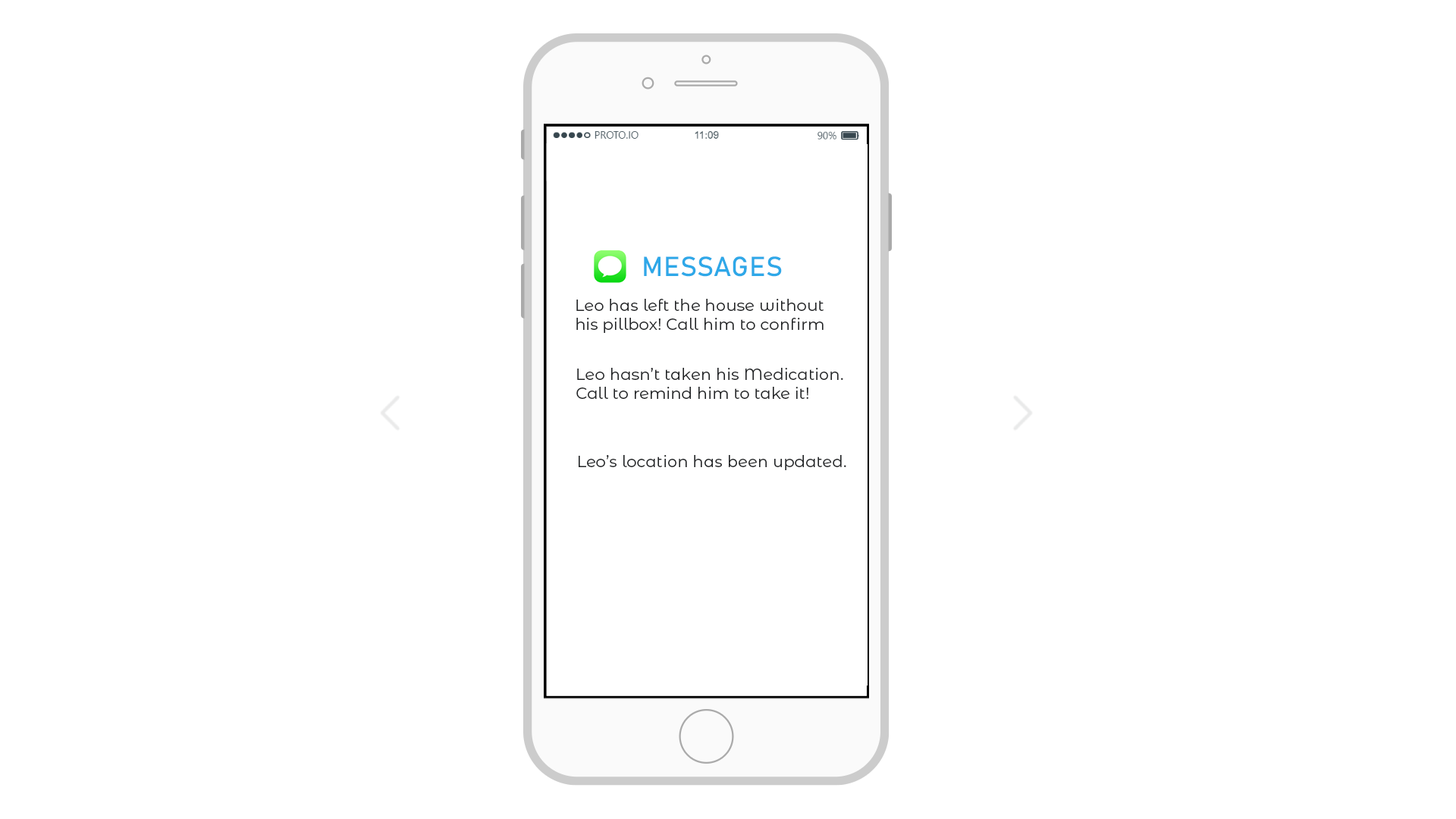
<style>
.page{position:relative;width:1456px;height:819px;background:#ffffff}
.page>*{position:absolute;margin:0}
.t1{font:27.3px "Bahnschrift";letter-spacing:0.01em;color:#2ea8e8}
.t2{font:15.9px "MontserratAlternates-Regular";letter-spacing:0.01em;color:#222426}
</style>
<div class="page">
<p class="t1" style="left:644px;top:256px;width:138px;height:21px">MESSAGES</p>
<p class="t2" style="left:576px;top:299px;width:248px;height:34px">Leo has left the house without<br>his pillbox! Call him to confirm</p>
<p class="t2" style="left:576px;top:368px;width:267px;height:31px">Leo hasn’t taken his Medication.<br>Call to remind him to take it!</p>
<p class="t2" style="left:579px;top:455px;width:267px;height:15px">Leo’s location has been updated.</p>
</div>
